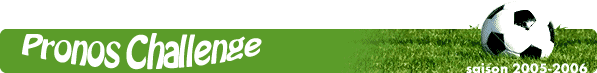
<style>
.page{position:relative;width:597px;height:73px;background:#ffffff}
.page>*{position:absolute;margin:0}
.t1{font:24px "BATAVIA";color:#ffffff}
</style>
<div class="page">
<p class="t1" style="left:21px;top:33px;width:241px;height:37px">Pronos Challenge</p>
</div>
